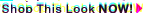
<style>
.page{position:relative;width:143px;height:13px;background:#ffffff}
.page>*{position:absolute;margin:0}
.t1{font:11.8px "HelveticaNeue-Medium";letter-spacing:0.05em}
.t2{font:11.8px "HelveticaNeue-Bold";letter-spacing:0.05em}
</style>
<div class="page">
<p class="t1" style="left:2px;top:2px;width:130px;height:12px">Shop This Look <span class="t2">NOW!</span></p>
</div>
